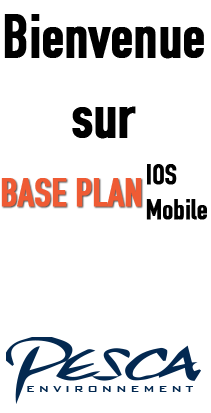
<style>
.page{position:relative;width:211px;height:413px;background:#ffffff}
.page>*{position:absolute;margin:0}
.t1{font:60px "DINEngschrift";letter-spacing:-0.01em;color:#000000;font-weight:bold}
.t2{font:28.3px "DINEngschrift";letter-spacing:-0.01em;color:#000000;font-weight:bold}
.t3{font:40px "DINEngschrift";letter-spacing:-0.01em;color:#ef5b34;font-weight:bold}
</style>
<div class="page">
<p class="t1" style="left:4px;top:14px;width:200px;height:45px">Bienvenue</p>
<p class="t1" style="left:72px;top:106px;width:64px;height:33px">sur</p>
<p class="t2" style="left:147px;top:164px;width:30px;height:21px">IOS</p>
<p class="t3" style="left:1px;top:178px;width:141px;height:29px">BASE PLAN</p>
<p class="t2" style="left:146px;top:199px;width:61px;height:21px">Mobile</p>
</div>
